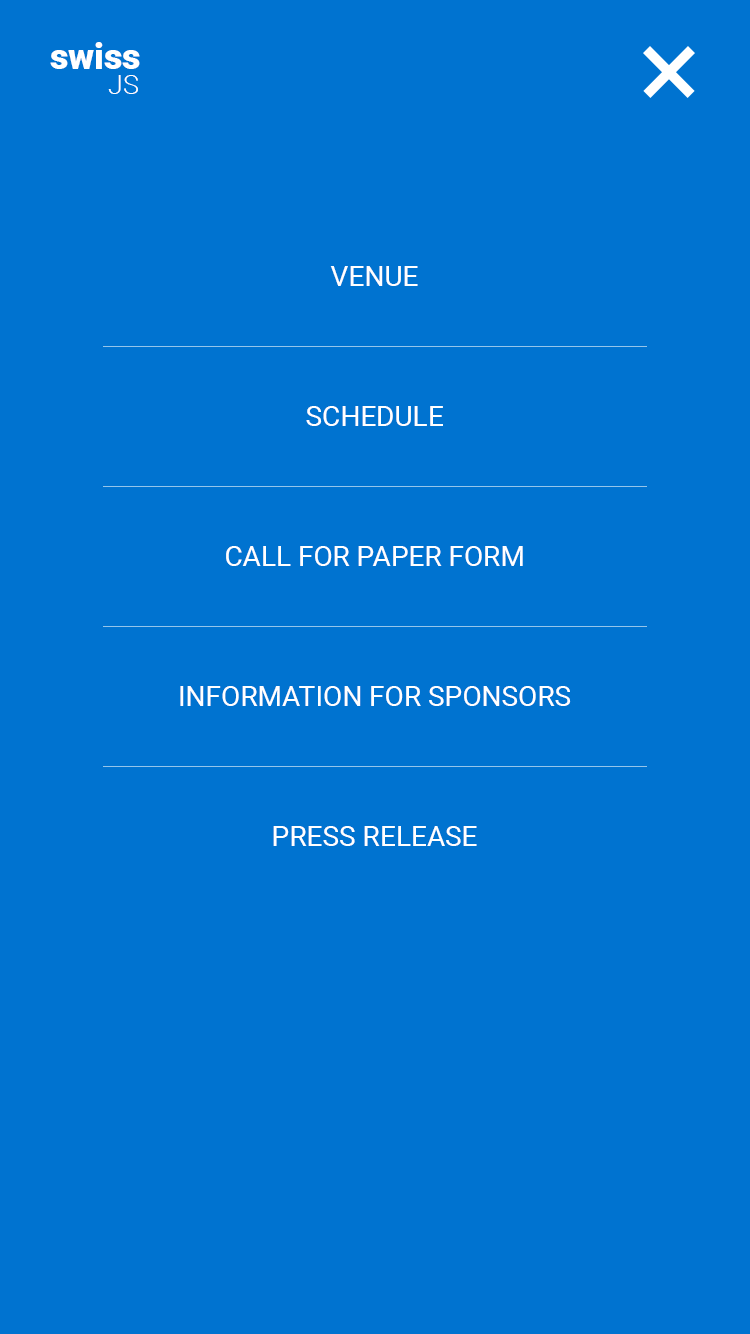
<style>
.page{position:relative;width:750px;height:1334px;background:#0073d0}
.page>*{position:absolute;margin:0}
.t1{font:36.1px "Roboto-Black";letter-spacing:-0.01em;color:#ffffff}
.t2{font:36.1px "Roboto-Black";letter-spacing:-0.02em;color:#ffffff}
.t3{font:36.1px "Roboto-Black";color:#ffffff}
.t4{font:26.7px "Roboto-Light";color:#ffffff}
.t5{font:28px/140px "Roboto-Regular";color:#ffffff;text-transform:uppercase}
</style>
<div class="page">
<p class="t1" style="left:50px;top:42px;width:90px;height:27px"><span class="t2">s</span><span class="t3">w</span>is<span class="t3">s</span></p>
<p class="t4" style="left:108px;top:75px;width:30px;height:19px">JS</p>
<p class="t5" style="left:180px;top:266px;width:391px;height:580px;text-align:center">Venue<br>Schedule<br>Call for paper form<br>Information for sponsors<br>Press release</p>
</div>
